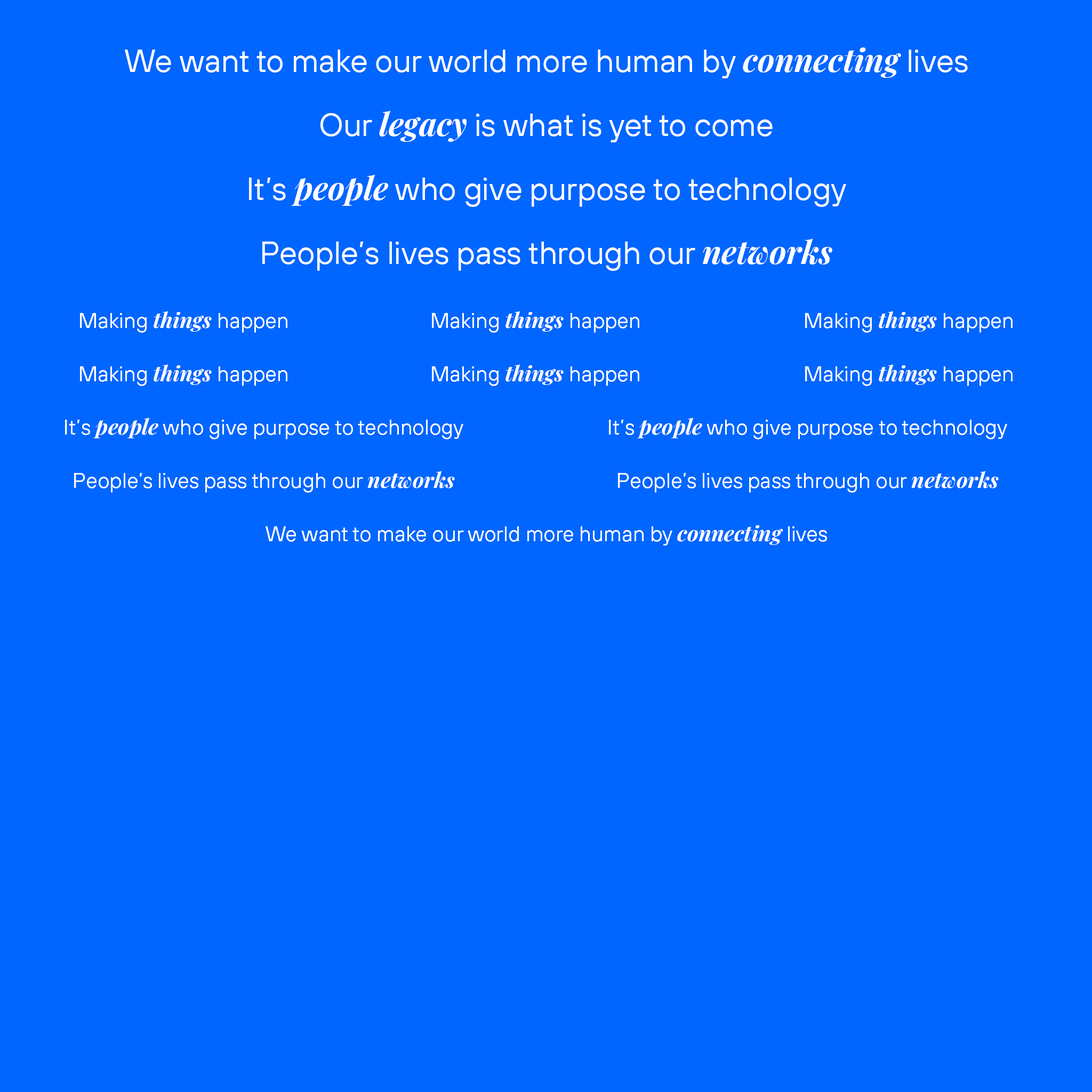
<style>
.page{position:relative;width:1092px;height:1092px;background:#0066ff}
.page>*{position:absolute;margin:0}
.t1{font:32px "TeleSans-Regular";color:#ffffff}
.t2{font:32px "PlayfairDisplay-BoldItalic";color:#ffffff}
.t3{font:21.3px "TeleSans-Regular";color:#ffffff}
.t4{font:21.3px "PlayfairDisplay-BoldItalic";color:#ffffff}
</style>
<div class="page">
<p class="t1" style="left:125px;top:47px;width:843px;height:31px">We want to make our world more human by <span class="t2">connecting</span> lives</p>
<p class="t1" style="left:320px;top:110px;width:453px;height:32px">Our <span class="t2">legacy</span> is what is yet to come</p>
<p class="t1" style="left:249px;top:174px;width:597px;height:33px">It’s <span class="t2">people</span> who give purpose to technology</p>
<p class="t1" style="left:262px;top:238px;width:570px;height:33px">People’s lives pass through our <span class="t2">networks</span></p>
<p class="t3" style="left:80px;top:311px;width:207px;height:22px">Making <span class="t4">things </span>happen</p>
<p class="t3" style="left:432px;top:311px;width:207px;height:22px">Making <span class="t4">things </span>happen</p>
<p class="t3" style="left:805px;top:311px;width:208px;height:22px">Making <span class="t4">things </span>happen</p>
<p class="t3" style="left:80px;top:364px;width:207px;height:22px">Making <span class="t4">things </span>happen</p>
<p class="t3" style="left:432px;top:364px;width:207px;height:22px">Making <span class="t4">things </span>happen</p>
<p class="t3" style="left:805px;top:364px;width:208px;height:22px">Making <span class="t4">things </span>happen</p>
<p class="t3" style="left:65px;top:417px;width:398px;height:22px">It’s <span class="t4">people</span> who give purpose to technology</p>
<p class="t3" style="left:609px;top:417px;width:398px;height:22px">It’s <span class="t4">people</span> who give purpose to technology</p>
<p class="t3" style="left:74px;top:471px;width:381px;height:22px">People’s lives pass through our <span class="t4">networks</span></p>
<p class="t3" style="left:618px;top:471px;width:381px;height:22px">People’s lives pass through our <span class="t4">networks</span></p>
<p class="t3" style="left:266px;top:525px;width:561px;height:20px">We want to make our world more human by <span class="t4">connecting</span> lives</p>
</div>
